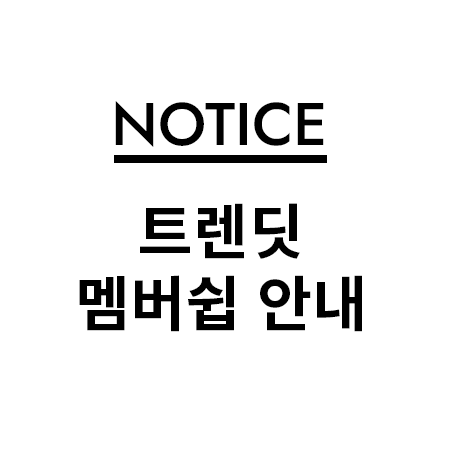
<style>
.page{position:relative;width:450px;height:450px;background:#ffffff}
.page>*{position:absolute;margin:0}
.t1{font:60px "Jost-Medium";color:#000000}
.t2{font:60px "NotoSansCJKkr-Bold";color:#000000}
</style>
<div class="page">
<p class="t1" style="left:115px;top:101px;width:209px;height:46px">NOTICE</p>
<p class="t2" style="left:79px;top:203px;width:283px;height:129px;text-align:center">트렌딧<br>멤버쉽 안내</p>
</div>
